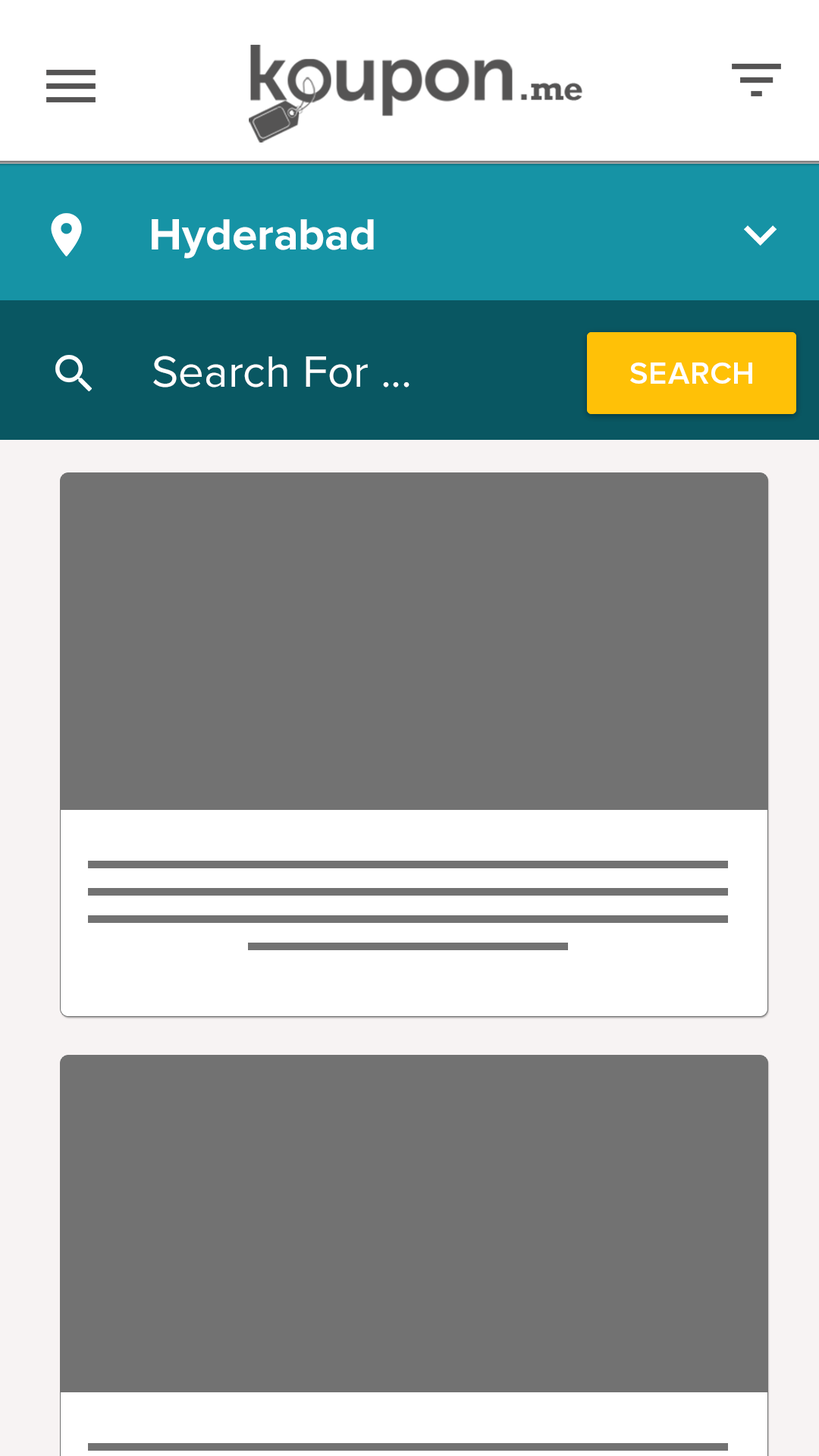
<style>
.page{position:relative;width:819px;height:1456px;background:#727272}
.page>*{position:absolute;margin:0}
.t1{font:45.5px "ProximaNova-Bold";color:#ffffff}
.t2{font:45.5px "ProximaNova-Regular";color:#ffffff}
.t3{font:31.8px "ProximaNova-Semibold";letter-spacing:0.01em;color:#ffffff;text-transform:uppercase}
</style>
<div class="page">
<p class="t1" style="left:152px;top:219px;width:222px;height:40px">Hyderabad</p>
<p class="t2" style="left:153px;top:356px;width:256px;height:32px">Search For ...</p>
<p class="t3" style="left:630px;top:362px;width:122px;height:22px">SEARCH</p>
</div>
